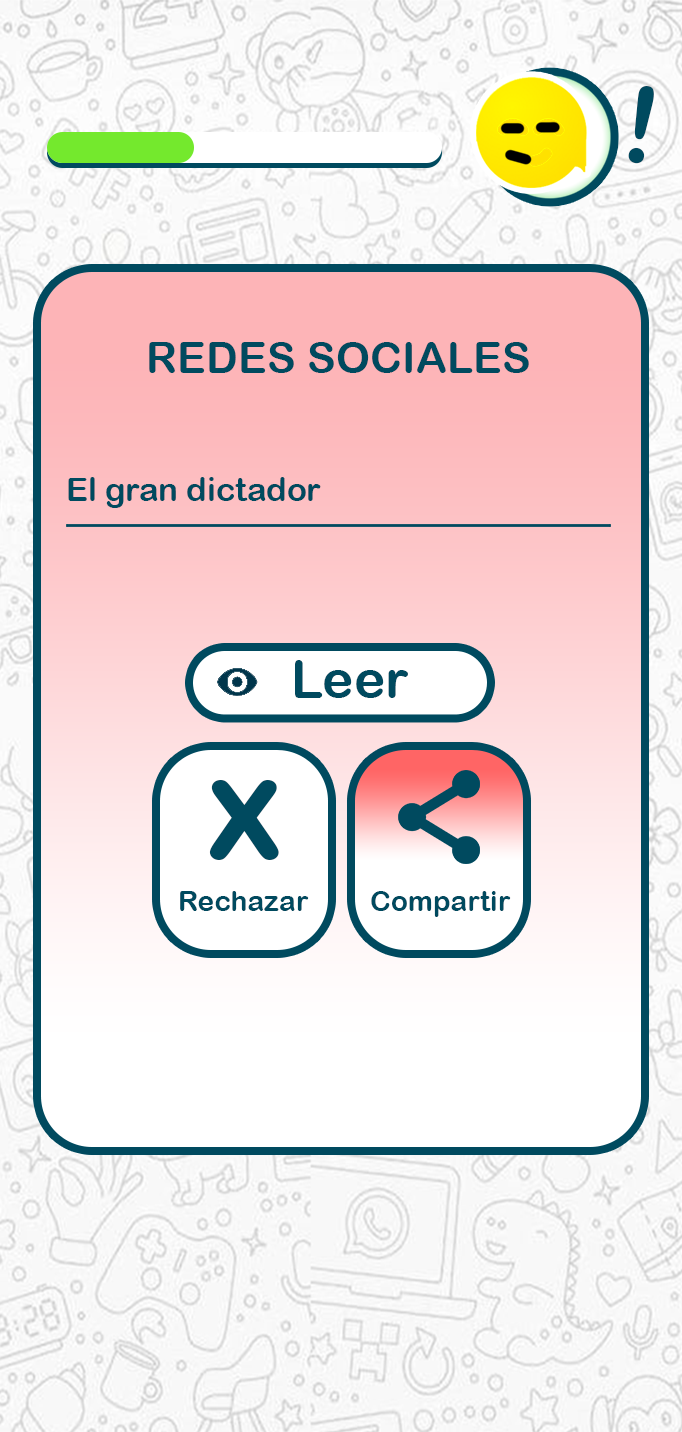
<style>
.page{position:relative;width:682px;height:1432px}
.page>*{position:absolute;margin:0}
.t1{font:105.2px "ArialRoundedMTBold";color:#004a5f}
.t2{font:43.4px "ArialRoundedMTBold";color:#004a5f}
.t3{font:32.7px "ArialRoundedMTBold";color:#004a5f}
.t4{font:52.5px "ArialRoundedMTBold";color:#004a5f}
.t5{font:146.6px "ArialRoundedMTBold";color:#004a5f}
.t6{font:28.3px "ArialRoundedMTBold";color:#004a5f}
</style>
<div class="page">
<p class="t1" style="left:628px;top:86px;width:26px;height:78px;rotate:9deg">!</p>
<p class="t2" style="left:149px;top:342px;width:380px;height:31px">REDES SOCIALES</p>
<p class="t3" style="left:68px;top:477px;width:253px;height:31px">El gran dictador</p>
<p class="t4" style="left:295px;top:660px;width:113px;height:38px">Leer</p>
<p class="t5" style="left:209px;top:780px;width:70px;height:80px">x</p>
<p class="t6" style="left:180px;top:891px;width:129px;height:20px">Rechazar</p>
<p class="t6" style="left:371px;top:891px;width:140px;height:26px">Compartir</p>
</div>
